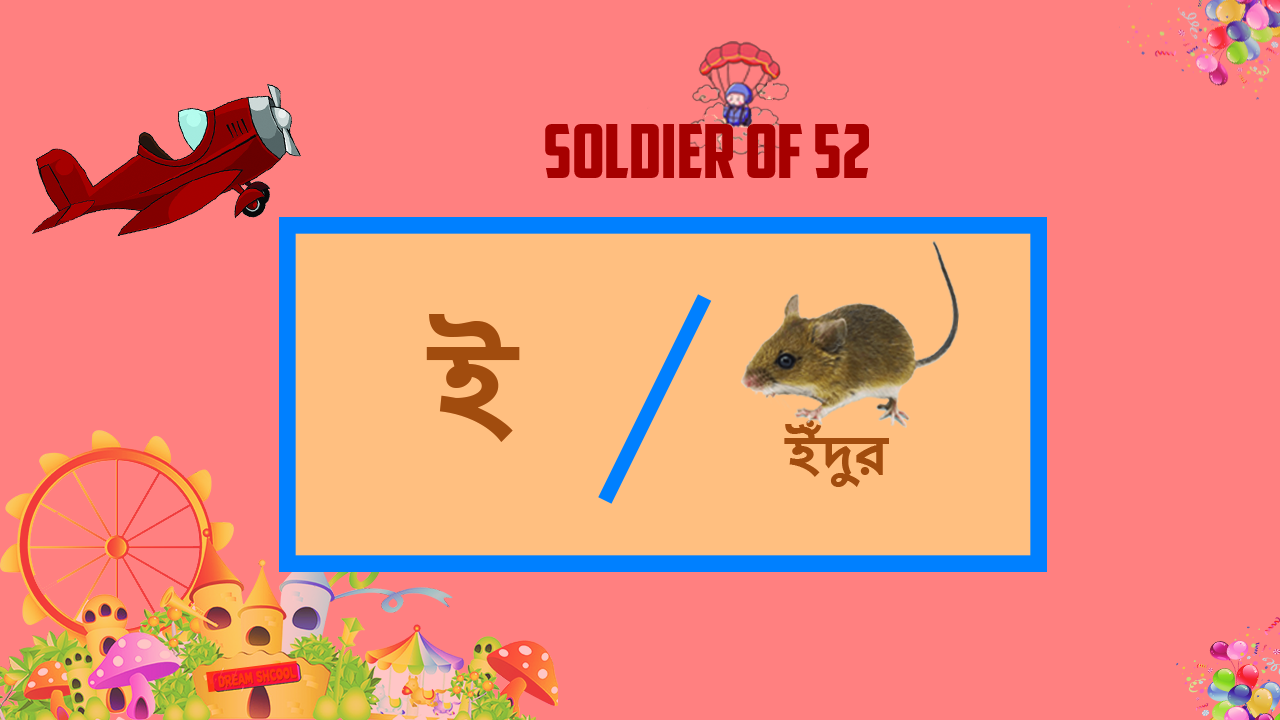
<style>
.page{position:relative;width:1280px;height:720px;background:#ff8080}
.page>*{position:absolute;margin:0}
.t1{font:74.5px "AmericanCaptain";color:#a60000}
.t2{font:122.1px "NirmalaUI-Bold";color:#a24b0d}
.t3{font:49.7px "NirmalaUI-Bold";color:#a24b0d}
</style>
<div class="page">
<p class="t1" style="left:545px;top:124px;width:324px;height:54px">SOLDIER OF 52</p>
<p class="t2" style="left:426px;top:314px;width:94px;height:128px">ই</p>
<p class="t3" style="left:784px;top:420px;width:105px;height:67px">ইঁদুর</p>
</div>
